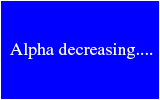
<style>
.page{position:relative;width:160px;height:100px;background:#0000ff}
.page>*{position:absolute;margin:0}
.t1{font:18px "Times-Roman";color:#ffffff}
</style>
<div class="page">
<p class="t1" style="left:10px;top:43px;width:143px;height:16px">Alpha decreasing....</p>
</div>
